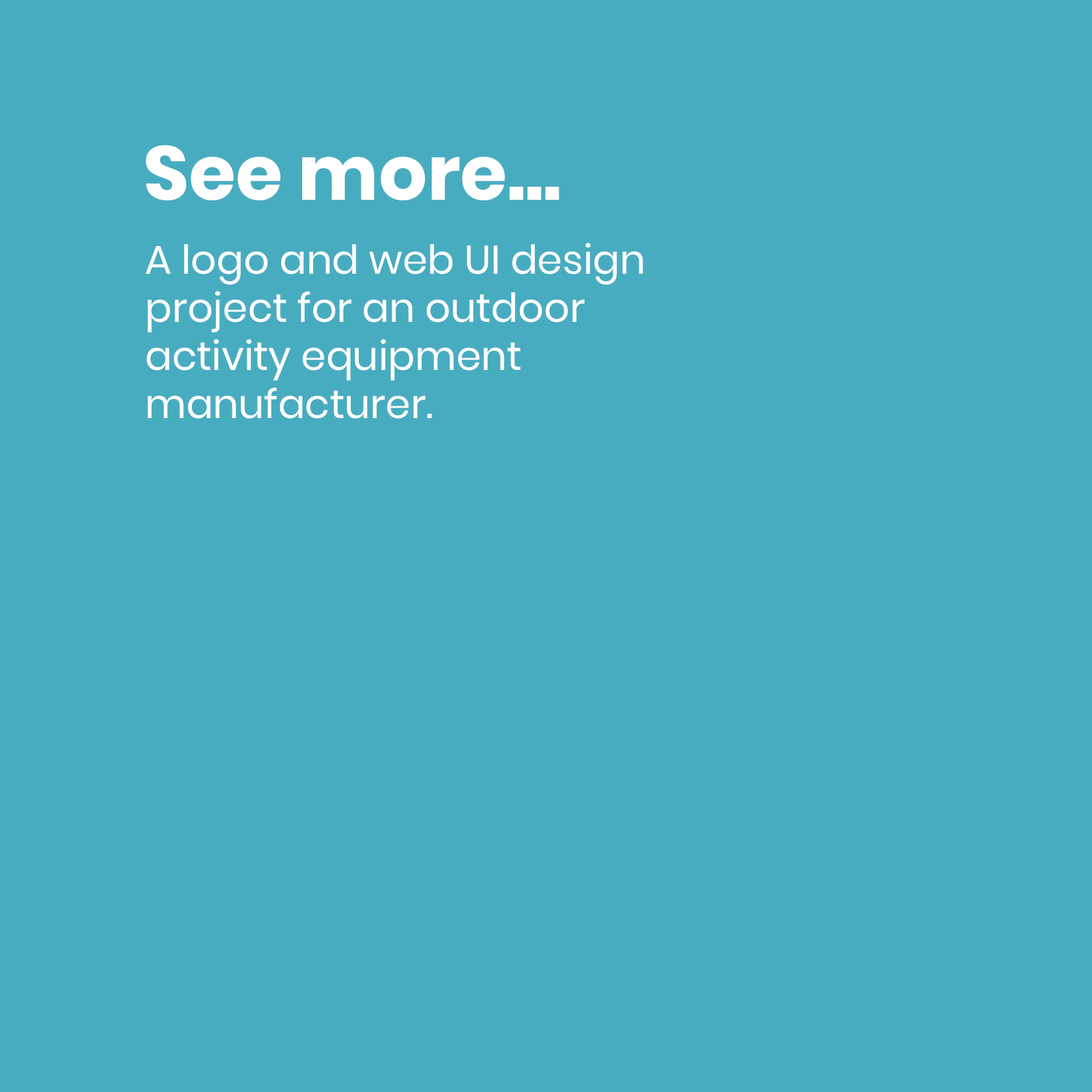
<style>
.page{position:relative;width:1092px;height:1092px;background:#48acc0}
.page>*{position:absolute;margin:0}
.t1{font:76px "Poppins-Bold";color:#ffffff}
.t2{font:40.1px "Poppins-Regular";color:#ffffff}
</style>
<div class="page">
<p class="t1" style="left:146px;top:145px;width:413px;height:55px">See more...</p>
<p class="t2" style="left:146px;top:243px;width:497px;height:176px">A logo and web UI design<br>project for an outdoor<br>activity equipment<br>manufacturer.</p>
</div>
